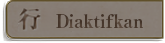
<style>
.page{position:relative;width:165px;height:43px}
.page>*{position:absolute;margin:0}
.t1{font:18px "RyuminPro-ExBold";letter-spacing:-0.04em;color:#48382d}
</style>
<div class="page">
<p class="t1" style="left:56px;top:14px;width:87px;height:14px">Diaktifkan</p>
</div>
